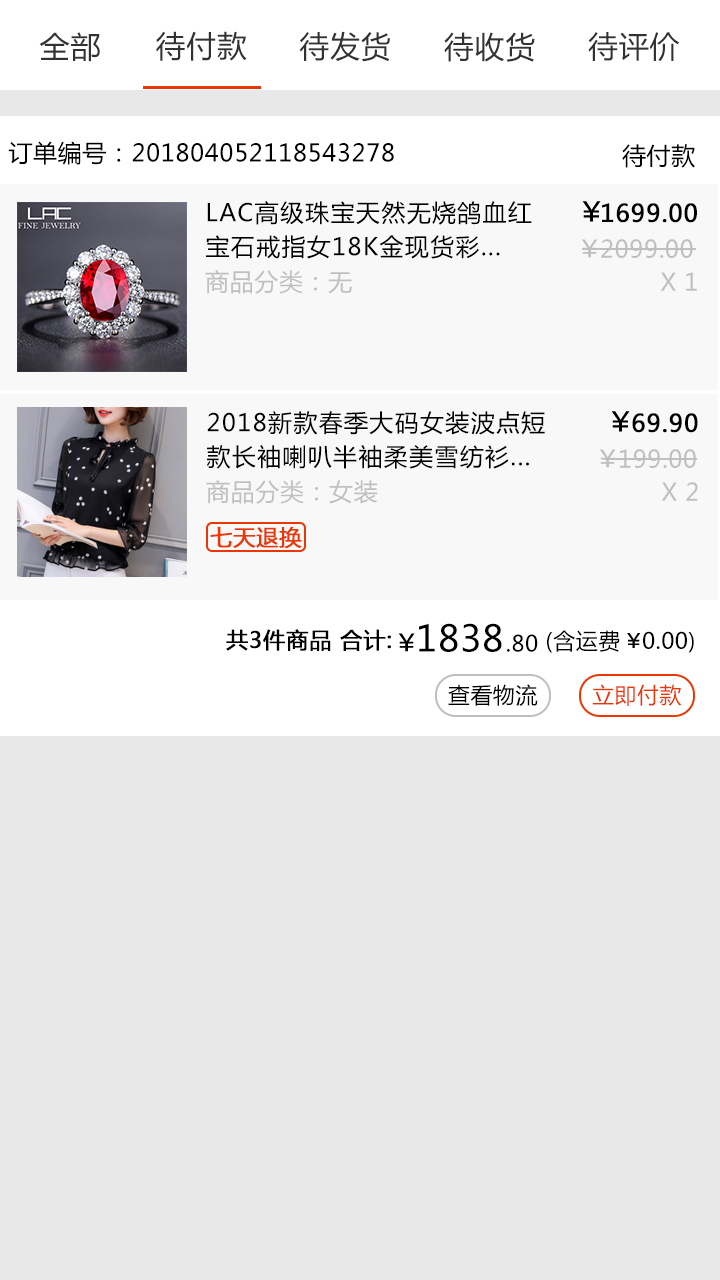
<style>
.page{position:relative;width:720px;height:1280px;background:#e9e8e8}
.page>*{position:absolute;margin:0}
.t1{font:30px "MicrosoftYaHei";letter-spacing:0.025em;color:#323232;text-transform:uppercase}
.t2{font:24px "MicrosoftYaHei";letter-spacing:0.025em;color:#000000;text-transform:uppercase}
.t3{font:24px/34px "MicrosoftYaHei";letter-spacing:0.055em;color:#000000;text-transform:uppercase}
.t4{font:24px "MicrosoftYaHei";letter-spacing:0.025em;color:#000000;text-transform:uppercase;font-weight:bold}
.t5{font:24px "MicrosoftYaHei";letter-spacing:0.025em;color:#bfbfbf;text-transform:uppercase}
.t6{font:22px "MicrosoftYaHei";letter-spacing:0.025em;color:#ea3706;text-transform:uppercase;font-weight:bold}
.t7{font:22px "MicrosoftYaHei";letter-spacing:0.025em;color:#000000;text-transform:uppercase;font-weight:bold}
.t8{font:36px "MicrosoftYaHei";letter-spacing:0.025em;color:#000000;text-transform:uppercase}
.t9{font:22px "MicrosoftYaHei";letter-spacing:0.025em;color:#000000;text-transform:uppercase}
.t10{font:22px "MicrosoftYaHei";letter-spacing:0.025em;color:#ea3706;text-transform:uppercase}
</style>
<div class="page">
<p class="t1" style="left:39px;top:32px;width:61px;height:30px">全部</p>
<p class="t1" style="left:156px;top:31px;width:91px;height:30px">待付款</p>
<p class="t1" style="left:299px;top:31px;width:91px;height:31px">待发货</p>
<p class="t1" style="left:444px;top:32px;width:91px;height:30px">待收货</p>
<p class="t1" style="left:588px;top:32px;width:92px;height:30px">待评价</p>
<p class="t2" style="left:8px;top:141px;width:386px;height:24px">订单编号：201804052118543278</p>
<p class="t2" style="left:622px;top:144px;width:73px;height:24px">待付款</p>
<p class="t3" style="left:206px;top:201px;width:326px;height:58px">LAC高级珠宝天然无烧鸽血红<br>宝石戒指女18k金现货彩...</p>
<p class="t4" style="left:602px;top:203px;width:95px;height:20px">1699.00</p>
<p class="t5" style="left:601px;top:239px;width:92px;height:19px">2099.00</p>
<p class="t5" style="left:205px;top:270px;width:147px;height:24px">商品分类：无</p>
<p class="t5" style="left:660px;top:272px;width:37px;height:19px">X 1</p>
<p class="t3" style="left:206px;top:411px;width:339px;height:58px">2018新款春季大码女装波点短<br>款长袖喇叭半袖柔美雪纺衫...</p>
<p class="t4" style="left:632px;top:413px;width:66px;height:20px">69.90</p>
<p class="t5" style="left:620px;top:449px;width:76px;height:19px">199.00</p>
<p class="t5" style="left:206px;top:480px;width:172px;height:24px">商品分类：女装</p>
<p class="t5" style="left:661px;top:482px;width:37px;height:19px">X 2</p>
<p class="t6" style="left:210px;top:526px;width:92px;height:23px">七天退换</p>
<p class="t7" style="left:226px;top:629px;width:165px;height:22px">共3件商品 合计:</p>
<p class="t8" style="left:419px;top:623px;width:83px;height:29px">1838</p>
<p class="t9" style="left:547px;top:630px;width:147px;height:23px">(含运费   0.00)</p>
<p class="t9" style="left:507px;top:634px;width:31px;height:18px">.80</p>
<p class="t9" style="left:448px;top:684px;width:90px;height:22px">查看物流</p>
<p class="t10" style="left:592px;top:684px;width:90px;height:22px">立即付款</p>
</div>
